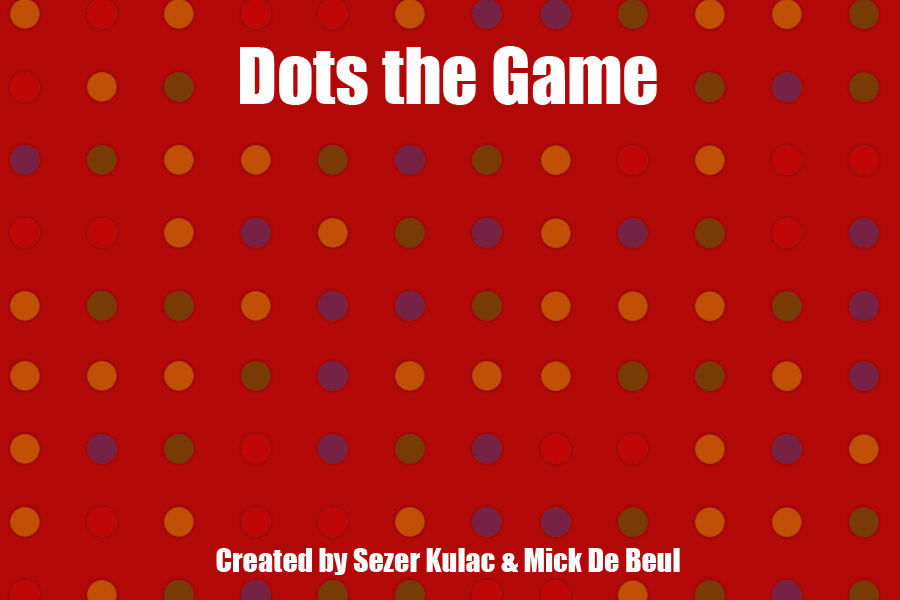
<style>
.page{position:relative;width:900px;height:600px;background:#b20808}
.page>*{position:absolute;margin:0}
.t1{font:30px "Impact";color:#ffffff}
.t2{font:72px "Impact";color:#ffffff}
</style>
<div class="page">
<p class="t1" style="left:216px;top:46px;width:464px;height:529px;text-align:center"><span class="t2">Dots the Game<br></span><br><br><br><br><br><br><br><br><br><br><br><br>Created by Sezer Kulac &amp; Mick De Beul</p>
</div>
